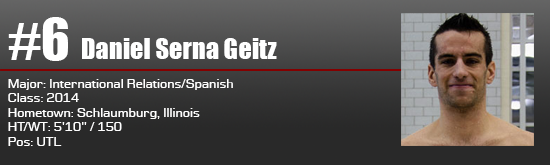
<style>
.page{position:relative;width:550px;height:165px}
.page>*{position:absolute;margin:0}
.t1{font:52.8px "Impact";color:#ffffff}
.t2{font:26.4px "Impact";color:#ffffff}
.t3{font:12px "Moire";color:#ffffff}
</style>
<div class="page">
<p class="t1" style="left:8px;top:17px;width:60px;height:44px">#6</p>
<p class="t2" style="left:82px;top:38px;width:195px;height:21px">Daniel Serna Geitz</p>
<p class="t3" style="left:8px;top:79px;width:225px;height:67px">Major: International Relations/Spanish<br>Class: 2014<br>Hometown: Schlaumburg, Illinois<br>HT/WT: 5'10'' / 150<br>Pos: UTL</p>
</div>
